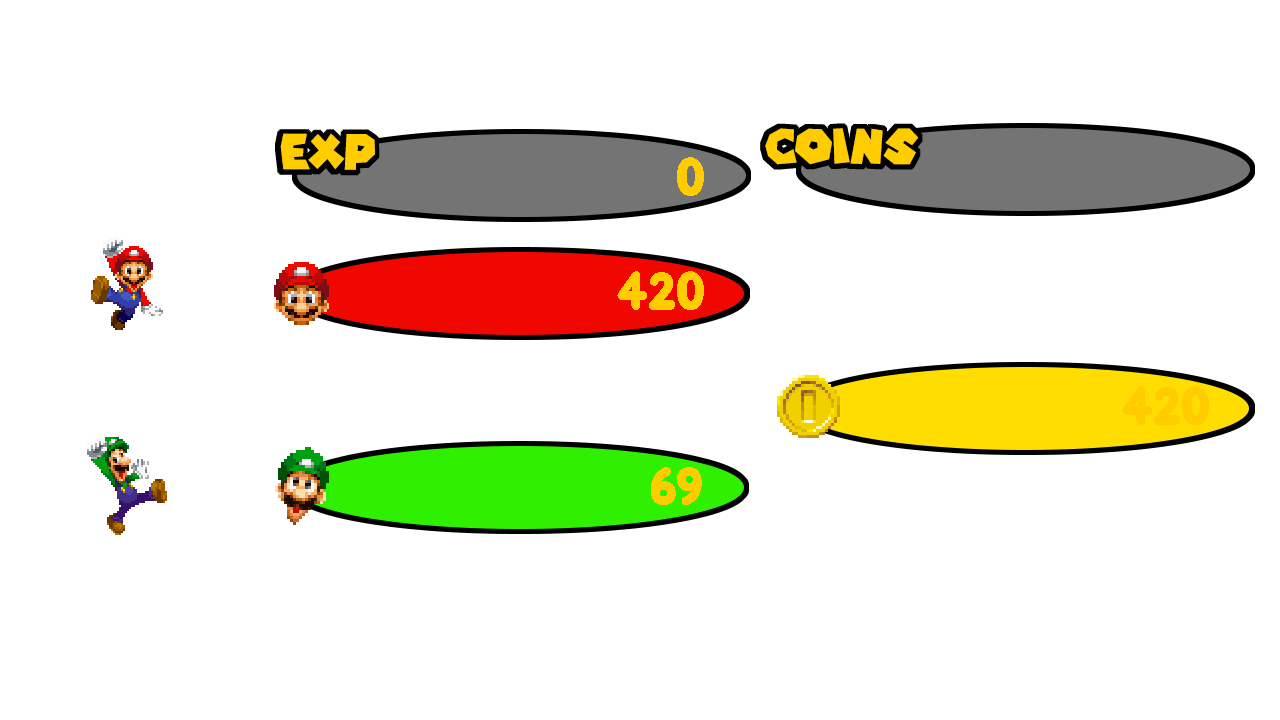
<style>
.page{position:relative;width:1280px;height:720px;background:#ffffff}
.page>*{position:absolute;margin:0}
.t1{font:48px "SuperMarioGalaxy";color:#ffcc00}
.t2{font:48px "KirbyClassic";color:#ffcc00}
</style>
<div class="page">
<p class="t1" style="left:280px;top:133px;width:95px;height:37px">EXP</p>
<p class="t1" style="left:765px;top:128px;width:154px;height:37px">COINS</p>
<p class="t2" style="left:677px;top:157px;width:27px;height:39px">0</p>
<p class="t2" style="left:617px;top:271px;width:87px;height:39px">420</p>
<p class="t2" style="left:1122px;top:386px;width:87px;height:39px">420</p>
<p class="t2" style="left:651px;top:467px;width:51px;height:38px">69</p>
</div>
